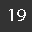
<style>
.page{position:relative;width:32px;height:32px;background:#333333}
.page>*{position:absolute;margin:0}
.t1{font:17.8px "MyriadPro-Regular";color:#ffffff;scale:1.12 1}
</style>
<div class="page">
<p class="t1" style="left:9px;top:9px;width:17px;height:12px">19</p>
</div>
